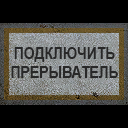
<style>
.page{position:relative;width:128px;height:128px;background:#000000}
.page>*{position:absolute;margin:0}
.t1{font:17px/19px "Arial-BoldMT";color:#282828;scale:0.82 1}
</style>
<div class="page">
<p class="t1" style="left:11px;top:47px;width:107px;height:31px;text-align:center">ПОДКЛЮЧИТЬ<br>ПРЕРЫВАТЕЛЬ</p>
</div>
